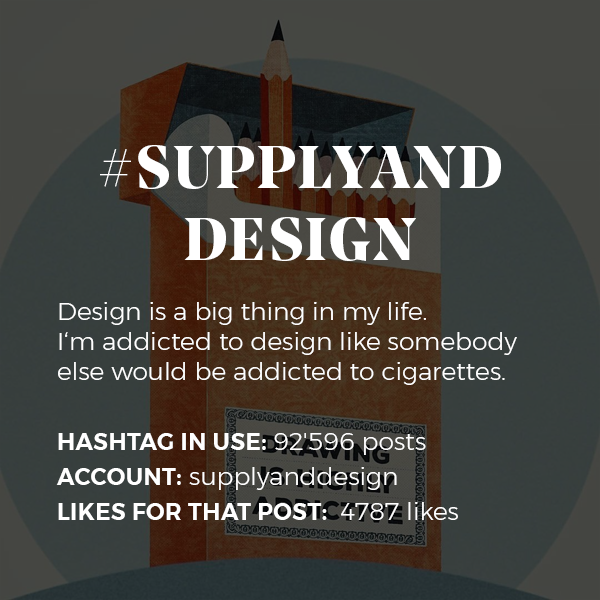
<style>
.page{position:relative;width:600px;height:600px}
.page>*{position:absolute;margin:0}
.t1{font:25px "Montserrat-Light";color:#ffffff}
.t2{font:60px "NoeDisplay-Bold";letter-spacing:0.05em;color:#ffffff;text-transform:uppercase}
.t3{font:23px/35px "Montserrat-SemiBold";letter-spacing:0.02em;color:#ffffff;text-transform:uppercase}
.t4{font:25px/35px "Montserrat-Light";color:#ffffff}
</style>
<div class="page">
<p class="t1" style="left:56px;top:145px;width:461px;height:375px;text-align:center"><span class="t2">#supplyanD design<br></span><br>Design is a big thing in my life. <br>I‘m addicted to design like somebody else would be addicted to cigarettes.<br><br><span class="t3">Hashtag in use: </span><span class="t4">92'596 posts<br></span><span class="t3">ACCOUNT: </span><span class="t4">supplyanddesign<br></span><span class="t3">Likes for that post: </span><span class="t4"> 4787 likes</span></p>
</div>
